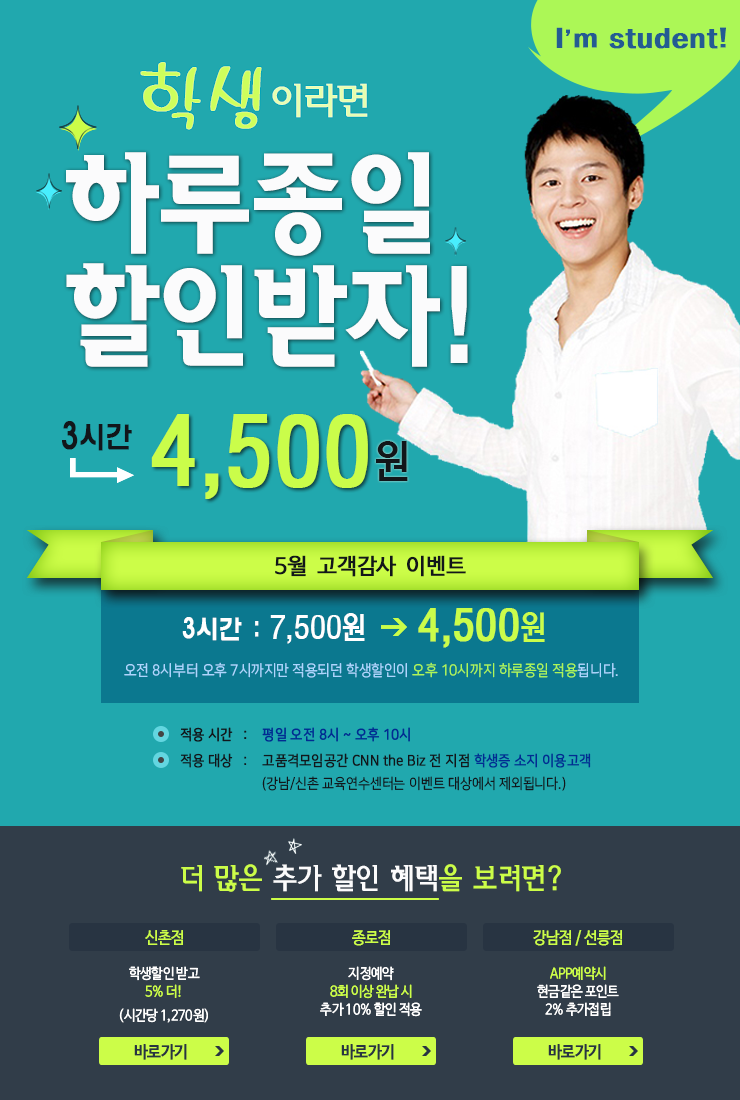
<style>
.page{position:relative;width:740px;height:1100px;background:#21a8ae}
.page>*{position:absolute;margin:0}
.t1{font:27.4px "HYsupB";letter-spacing:0.01em;color:#245c93;font-weight:bold}
.t2{font:23.4px "HYsupB";letter-spacing:-0.67em;color:#245c93;font-weight:bold}
.t3{font:36.4px "HaanSomangM";letter-spacing:-0.075em;color:#e5feaf}
.t4{font:67.7px "MDAlong";letter-spacing:0.025em;color:#cefe5c;font-weight:bold}
.t5{font:110px/113px "HaanSomangB";letter-spacing:-0.065em;color:#fbfbfc;scale:0.91 1}
.t6{font:87.9px "MoeumTR-HM";letter-spacing:-0.015em;color:#cafd4a;font-weight:bold}
.t7{font:31px "HYwulM";letter-spacing:-0.06em;color:#12161a;font-weight:bold;scale:0.87 1}
.t8{font:36px "HYwulM";letter-spacing:-0.06em;color:#12161a;font-weight:bold;scale:0.83 1}
.t9{font:45px "MoeumTR-HM";letter-spacing:0.025em;color:#12161a}
.t10{font:22px "NanumBarunGothicOTF";letter-spacing:-0.015em;color:#12161a;font-weight:bold}
.t11{font:26.5px "HYwulM";letter-spacing:-0.06em;color:#ffffff;font-weight:bold;scale:0.88 1}
.t12{font:27.6px "HYwulM";letter-spacing:-0.06em;color:#ffffff;font-weight:bold;scale:0.84 1}
.t13{font:30.4px "MoeumTR-HM";letter-spacing:-0.025em;color:#ffffff}
.t14{font:41.2px "MoeumTR-HM";letter-spacing:-0.025em;color:#cafd4a;font-weight:bold}
.t15{font:33px "MoeumTR-HM";letter-spacing:-0.025em;color:#cafd4a}
.t16{font:15.1px "NanumSquareOTFR";color:#acd6ff;scale:0.91 1}
.t17{font:15.1px "NanumSquareOTFR";color:#acf756;scale:0.91 1}
.t18{font:14.4px "NanumSquareOTFR";color:#022b92;font-weight:bold;scale:0.91 1}
.t19{font:14.4px "NanumSquareOTFR";color:#12161a;font-weight:bold;scale:0.91 1}
.t20{font:14.4px/22.9px "NanumSquareOTFR";color:#12161a;font-weight:bold;scale:0.91 1}
.t21{font:14.4px/22.9px "NanumSquareOTFR";color:#022b92;font-weight:bold;scale:0.91 1}
.t22{font:14.4px/22.9px "NanumSquareOTFR";color:#12161a;scale:0.91 1}
.t23{font:28.6px "HaanSomangM";letter-spacing:-0.065em;color:#fbfbfc;scale:0.91 1}
.t24{font:28.6px "HaanSomangM";letter-spacing:-0.065em;color:#ccfd48;scale:0.91 1}
.t25{font:16.5px "NanumBarunGothicOTF";letter-spacing:-0.025em;color:#ccfd48;scale:0.91 1}
.t26{font:14.3px/24px "NanumBarunGothicOTF";letter-spacing:-0.025em;color:#ffffff;scale:0.91 1}
.t27{font:14.3px/18px "NanumBarunGothicOTF";letter-spacing:-0.025em;color:#ffffff;scale:0.91 1}
.t28{font:14.3px/18px "NanumBarunGothicOTF";letter-spacing:-0.025em;color:#ccfd48;scale:0.91 1}
.t29{font:16.5px "NanumBarunGothicOTF";letter-spacing:-0.025em;color:#283442;font-weight:bold;scale:0.91 1}
</style>
<div class="page">
<p class="t1" style="left:556px;top:27px;width:170px;height:22px">I<span class="t2">’</span>m student!</p>
<p class="t3" style="left:140px;top:62px;width:228px;height:68px"><span class="t4">학생 </span>이라면</p>
<p class="t5" style="left:66px;top:152px;width:402px;height:215px">하루종일<br>할인받자!</p>
<p class="t6" style="left:151px;top:414px;width:217px;height:85px">4,500</p>
<p class="t7" style="left:62px;top:421px;width:70px;height:30px"><span class="t8">3</span>시간</p>
<p class="t9" style="left:376px;top:441px;width:32px;height:40px">원</p>
<p class="t10" style="left:275px;top:555px;width:191px;height:22px">5월  고객감사  이벤트</p>
<p class="t11" style="left:182px;top:617px;width:60px;height:24px"><span class="t12">3</span>시간</p>
<p class="t13" style="left:270px;top:613px;width:95px;height:31px">7,500원</p>
<p class="t14" style="left:418px;top:608px;width:127px;height:40px">4,500<span class="t15">원</span></p>
<p class="t12" style="left:255px;top:621px;width:4px;height:16px">:</p>
<p class="t16" style="left:124px;top:662px;width:494px;height:16px">오전 8시부터 오후 7시까지만 적용되던 학생할인이 <span class="t17">오후 10시까지 하루종일 적용</span>됩니다.</p>
<p class="t18" style="left:180px;top:727px;width:230px;height:15px"><span class="t19">적용 시간   :    </span>평일 오전 8시 ~ 오후 10시</p>
<p class="t20" style="left:180px;top:753px;width:411px;height:38px">적용 대상   :    고품격모임공간 CNN the Biz 전 지점 <span class="t21">학생증 소지 이용고객<br></span><span class="t22">      (강남/신촌 교육연수센터는 이벤트 대상에서 제외됩니다.)</span></p>
<p class="t23" style="left:181px;top:864px;width:380px;height:28px"><span class="t24">더 많은 </span>추가 할인 혜택<span class="t24">을 보려면?</span></p>
<p class="t25" style="left:145px;top:930px;width:38px;height:15px">신촌점</p>
<p class="t25" style="left:352px;top:930px;width:38px;height:16px">종로점</p>
<p class="t25" style="left:533px;top:930px;width:89px;height:16px">강남점 / 선릉점</p>
<p class="t26" style="left:119px;top:966px;width:89px;height:57px;text-align:center"><span class="t27">학생할인 받고<br></span><span class="t28">5% 더!<br></span>(시간당 1,270원)</p>
<p class="t27" style="left:320px;top:966px;width:102px;height:51px;text-align:center">지정예약<br><span class="t28">8회 이상 완납 시<br></span>추가 10% 할인 적용</p>
<p class="t27" style="left:537px;top:966px;width:82px;height:50px;text-align:center"><span class="t28">APP예약시<br></span>현금같은 포인트<br>2% 추가접립</p>
<p class="t29" style="left:134px;top:1044px;width:53px;height:16px">바로가기</p>
<p class="t29" style="left:341px;top:1044px;width:53px;height:16px">바로가기</p>
<p class="t29" style="left:548px;top:1044px;width:53px;height:16px">바로가기</p>
</div>
